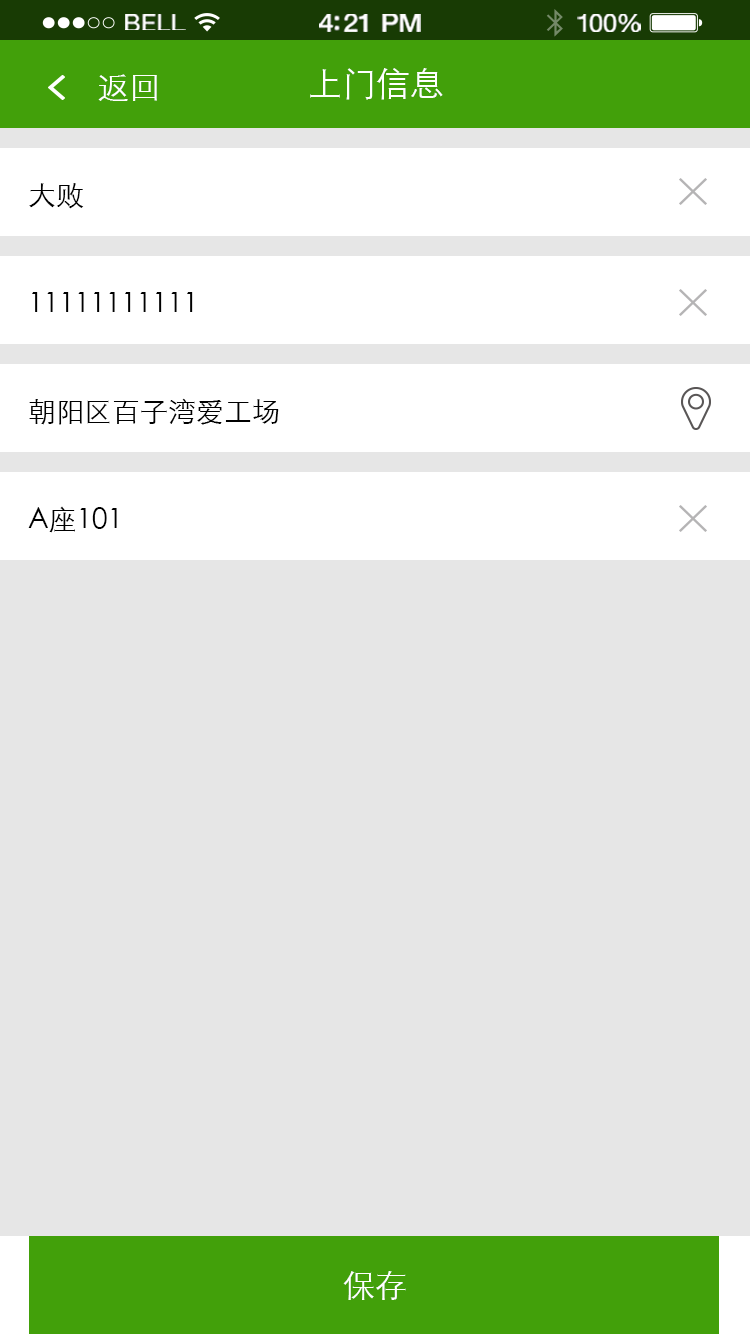
<style>
.page{position:relative;width:750px;height:1334px;background:#e6e6e6}
.page>*{position:absolute;margin:0}
.t1{font:23.3px "HelveticaNeue";letter-spacing:0.02em;color:#ffffff;scale:1.06 1}
.t2{font:25.3px "HelveticaNeue-Medium";letter-spacing:-0.02em;color:#ffffff;scale:1.06 1}
.t3{font:24.3px "HelveticaNeue";letter-spacing:-0.02em;color:#ffffff;scale:1.06 1}
.t4{font:32px "STXihei";color:#ffffff}
.t5{font:34px "STXihei";color:#ffffff}
.t6{font:28px "STXihei";color:#000000}
</style>
<div class="page">
<p class="t1" style="left:125px;top:14px;width:61px;height:16px">BELL</p>
<p class="t2" style="left:319px;top:14px;width:102px;height:18px">4:21 PM</p>
<p class="t3" style="left:577px;top:14px;width:64px;height:18px">100%</p>
<p class="t4" style="left:98px;top:74px;width:59px;height:27px">返回</p>
<p class="t5" style="left:310px;top:68px;width:133px;height:32px">上门信息</p>
<p class="t6" style="left:29px;top:183px;width:55px;height:26px">大败</p>
<p class="t6" style="left:32px;top:292px;width:161px;height:20px">11111111111</p>
<p class="t6" style="left:29px;top:398px;width:250px;height:27px">朝阳区百子湾爱工场</p>
<p class="t6" style="left:28px;top:506px;width:89px;height:27px">A座101</p>
<p class="t4" style="left:343px;top:1271px;width:63px;height:29px">保存</p>
</div>
